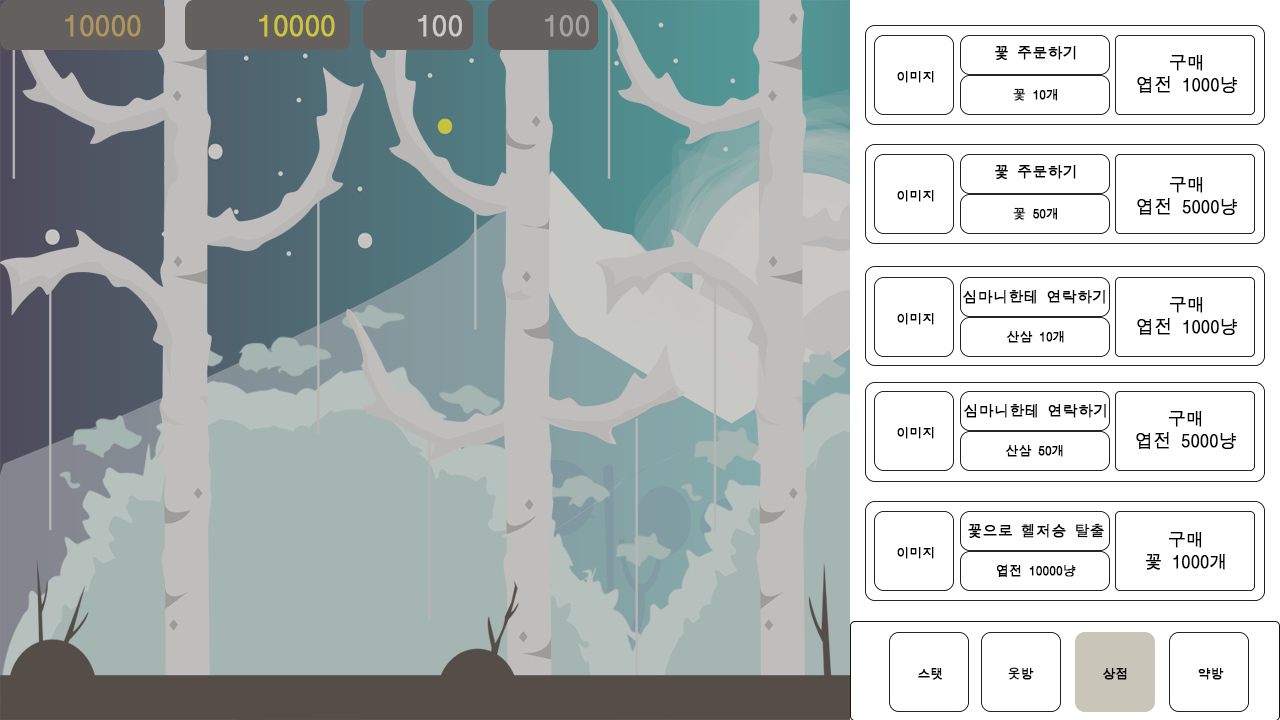
<style>
.page{position:relative;width:1280px;height:720px;background:#ffffff}
.page>*{position:absolute;margin:0}
.t1{font:29.7px "DotumChe";color:#ae955d;font-weight:bold}
.t2{font:29.7px "DotumChe";color:#cbc53d;font-weight:bold}
.t3{font:29.7px "DotumChe";color:#cbcac7;font-weight:bold}
.t4{font:29.7px "DotumChe";color:#b6b5b5;font-weight:bold}
.t5{font:15px "DotumChe";color:#000000;font-weight:bold}
.t6{font:18px "DotumChe";color:#000000;font-weight:bold}
.t7{font:12.9px "DotumChe";color:#000000;font-weight:bold}
</style>
<div class="page">
<p class="t1" style="left:65px;top:15px;width:76px;height:22px">10000</p>
<p class="t2" style="left:259px;top:15px;width:76px;height:22px">10000</p>
<p class="t3" style="left:418px;top:15px;width:44px;height:22px">100</p>
<p class="t4" style="left:545px;top:15px;width:44px;height:22px">100</p>
<p class="t5" style="left:995px;top:46px;width:81px;height:14px">꽃 주문하기</p>
<p class="t6" style="left:1137px;top:55px;width:100px;height:38px;text-align:center">구매<br>엽전 1000냥</p>
<p class="t7" style="left:897px;top:71px;width:37px;height:12px">이미지</p>
<p class="t7" style="left:1013px;top:88px;width:44px;height:13px">꽃 10개</p>
<p class="t5" style="left:995px;top:165px;width:81px;height:14px">꽃 주문하기</p>
<p class="t6" style="left:1137px;top:177px;width:100px;height:38px;text-align:center">구매<br>엽전 5000냥</p>
<p class="t7" style="left:897px;top:190px;width:37px;height:12px">이미지</p>
<p class="t7" style="left:1013px;top:207px;width:44px;height:13px">꽃 50개</p>
<p class="t5" style="left:963px;top:290px;width:142px;height:14px">심마니한테 연락하기</p>
<p class="t6" style="left:1137px;top:297px;width:100px;height:38px;text-align:center">구매<br>엽전 1000냥</p>
<p class="t7" style="left:897px;top:313px;width:37px;height:12px">이미지</p>
<p class="t7" style="left:1007px;top:331px;width:57px;height:12px">산삼 10개</p>
<p class="t5" style="left:964px;top:404px;width:142px;height:14px">심마니한테 연락하기</p>
<p class="t6" style="left:1136px;top:411px;width:100px;height:38px;text-align:center">구매<br>엽전 5000냥</p>
<p class="t7" style="left:897px;top:427px;width:37px;height:12px">이미지</p>
<p class="t7" style="left:1006px;top:445px;width:57px;height:12px">산삼 50개</p>
<p class="t5" style="left:968px;top:523px;width:136px;height:15px">꽃으로 헬저승 탈출</p>
<p class="t6" style="left:1145px;top:532px;width:80px;height:38px;text-align:center">구매<br>꽃 1000개</p>
<p class="t7" style="left:897px;top:547px;width:37px;height:12px">이미지</p>
<p class="t7" style="left:997px;top:564px;width:79px;height:13px">엽전 10000냥</p>
<p class="t7" style="left:918px;top:668px;width:24px;height:12px">스탯</p>
<p class="t7" style="left:1008px;top:667px;width:26px;height:13px">옷방</p>
<p class="t7" style="left:1103px;top:668px;width:24px;height:12px">상점</p>
<p class="t7" style="left:1198px;top:668px;width:26px;height:12px">약방</p>
</div>
